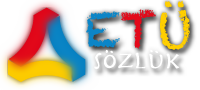
<style>
.page{position:relative;width:200px;height:90px;background:#ffffff}
.page>*{position:absolute;margin:0}
.t1{font:48px "Chalkduster";color:#0b86c7}
.t2{font:48px "Chalkduster";color:#e4091a}
.t3{font:48px "Chalkduster";color:#ffcf00}
.t4{font:24px "Herculanum";color:#ffffff}
</style>
<div class="page">
<p class="t1" style="left:86px;top:0px;width:104px;height:50px">E<span class="t2">T</span><span class="t3">Ü</span></p>
<p class="t4" style="left:94px;top:49px;width:86px;height:21px">sözlük</p>
</div>
